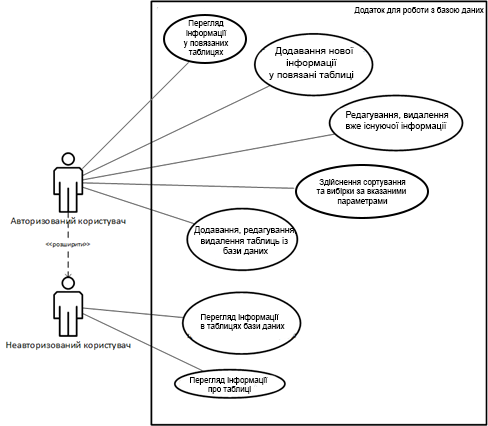
<style>
.page{position:relative;width:488px;height:426px;background:#ffffff}
.page>*{position:absolute;margin:0}
.t1{font:8px "ArialMT";color:#000000}
.t2{font:10px "ArialMT";color:#000000}
.t3{font:10px "ArialMT";color:#ffffff}
.t4{font:9px "ArialMT";color:#000000}
.t5{font:8.7px "ArialMT";color:#000000}
</style>
<div class="page">
<p class="t1" style="left:354px;top:7px;width:130px;height:8px">Додаток для роботи з базою даних</p>
<p class="t1" style="left:183px;top:20px;width:46px;height:37px;text-align:center">Перегляд інформації <br>у повязаних <br>таблицях</p>
<p class="t2" style="left:269px;top:47px;width:85px;height:33px;text-align:center"><span class="t3">L</span>Додавання нової<br> інформації <br>у повязані таблиці</p>
<p class="t4" style="left:346px;top:111px;width:103px;height:20px">Редагування, видалення <br>вже існуючої інформації</p>
<p class="t1" style="left:316px;top:179px;width:90px;height:27px;text-align:center">Здійснення сортування<br>та вибірки за вказаними <br>параметрами</p>
<p class="t5" style="left:194px;top:226px;width:103px;height:29px;text-align:center">Додавання, редагування,<br>видалення таблиць із <br>бази даних</p>
<p class="t1" style="left:200px;top:314px;width:85px;height:17px">Перегляд інформації <br>в таблицях бази даних</p>
<p class="t1" style="left:190px;top:377px;width:78px;height:17px;text-align:center">Перегляд інформації <br>про таблиці</p>
</div>
